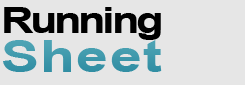
<style>
.page{position:relative;width:245px;height:85px;background:#e6e6e6}
.page>*{position:absolute;margin:0}
.t1{font:36px "Arial-BoldMT";letter-spacing:-0.075em;color:#000000;scale:1.25 1}
.t2{font:45px "Arial-BoldMT";letter-spacing:0.025em;color:#3e98ab;scale:1.27 1}
</style>
<div class="page">
<p class="t1" style="left:4px;top:7px;width:157px;height:33px">Running</p>
<p class="t2" style="left:3px;top:40px;width:159px;height:32px">Sheet</p>
</div>
